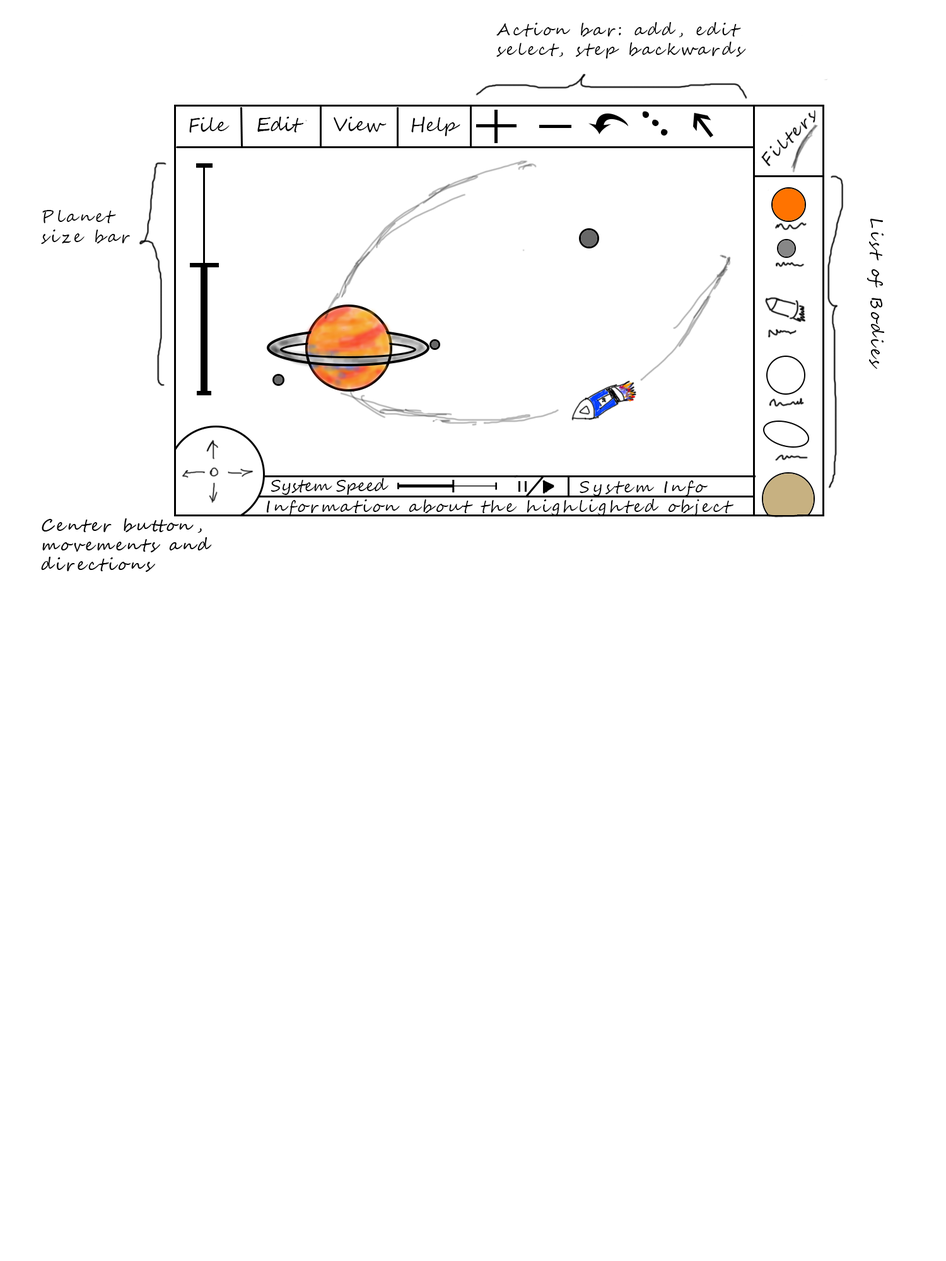
<style>
.page{position:relative;width:946px;height:1261px;background:#ffffff}
.page>*{position:absolute;margin:0}
.t1{font:16.4px "SegoeScript";letter-spacing:0.16em;color:#000000}
.t2{font:18.9px "SegoeScript";color:#000000}
.t3{font:16.4px "SegoeScript";color:#000000}
</style>
<div class="page">
<p class="t1" style="left:496px;top:22px;width:250px;height:37px">Action bar: add, edit<br>select, step backwards</p>
<p class="t2" style="left:189px;top:117px;width:40px;height:16px">File</p>
<p class="t2" style="left:257px;top:117px;width:47px;height:15px">Edit</p>
<p class="t2" style="left:334px;top:117px;width:52px;height:15px">View</p>
<p class="t2" style="left:411px;top:117px;width:49px;height:19px">Help</p>
<p class="t1" style="left:41px;top:210px;width:89px;height:34px">Planet <br>size bar</p>
<p class="t3" style="left:270px;top:478px;width:118px;height:17px">System Speed</p>
<p class="t1" style="left:579px;top:480px;width:128px;height:16px">System Info</p>
<p class="t1" style="left:266px;top:499px;width:467px;height:17px">Information about the highlighted object</p>
</div>
